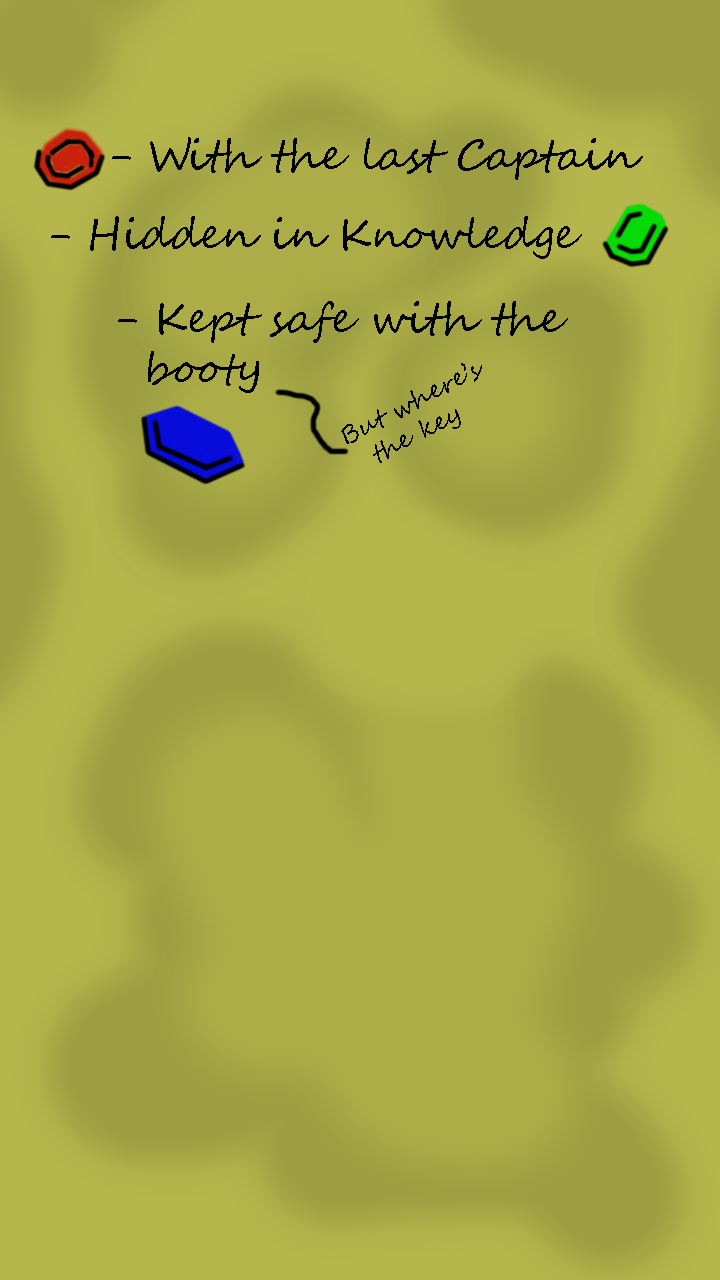
<style>
.page{position:relative;width:720px;height:1280px}
.page>*{position:absolute;margin:0}
.t1{font:41.7px "SegoeScript";color:#000000}
.t2{font:25px "SegoeScript";color:#000000}
</style>
<div class="page">
<p class="t1" style="left:112px;top:137px;width:531px;height:43px">- With the last Captain</p>
<p class="t1" style="left:51px;top:216px;width:531px;height:43px">- Hidden in Knowledge</p>
<p class="t1" style="left:118px;top:301px;width:450px;height:92px">- Kept safe with the <br>  booty</p>
<p class="t2" style="left:341px;top:363px;width:141px;height:100px;rotate:-27deg">But where’s <br>  the key</p>
</div>
